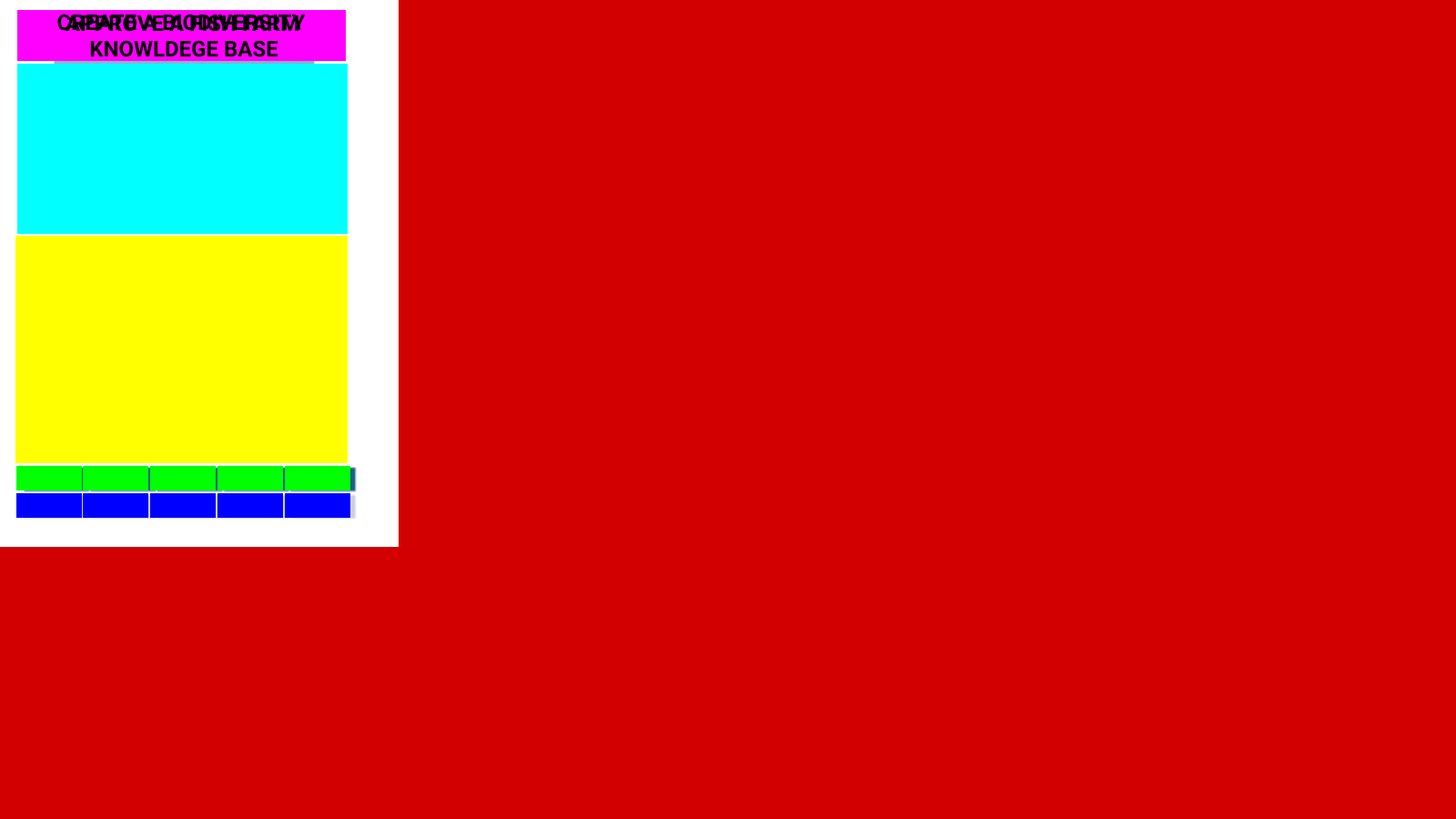
<style>
.page{position:relative;width:1456px;height:819px;background:#d20000}
.page>*{position:absolute;margin:0}
.t1{font:21.8px "Roboto-Bold";color:#000000}
</style>
<div class="page">
<p class="t1" style="left:57px;top:14px;width:249px;height:43px;text-align:center">CREATE A BIODIVERSITY <br>KNOWLDEGE BASE</p>
<p class="t1" style="left:66px;top:15px;width:232px;height:17px">APPROVE A FISH FARM</p>
</div>
